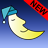
<style>
.page{position:relative;width:48px;height:48px}
.page>*{position:absolute;margin:0}
.t1{font:8.3px "Arial-BoldMT";color:#000000}
</style>
<div class="page">
<p class="t1" style="left:30px;top:0px;width:18px;height:16px;rotate:41deg">NEW</p>
</div>
